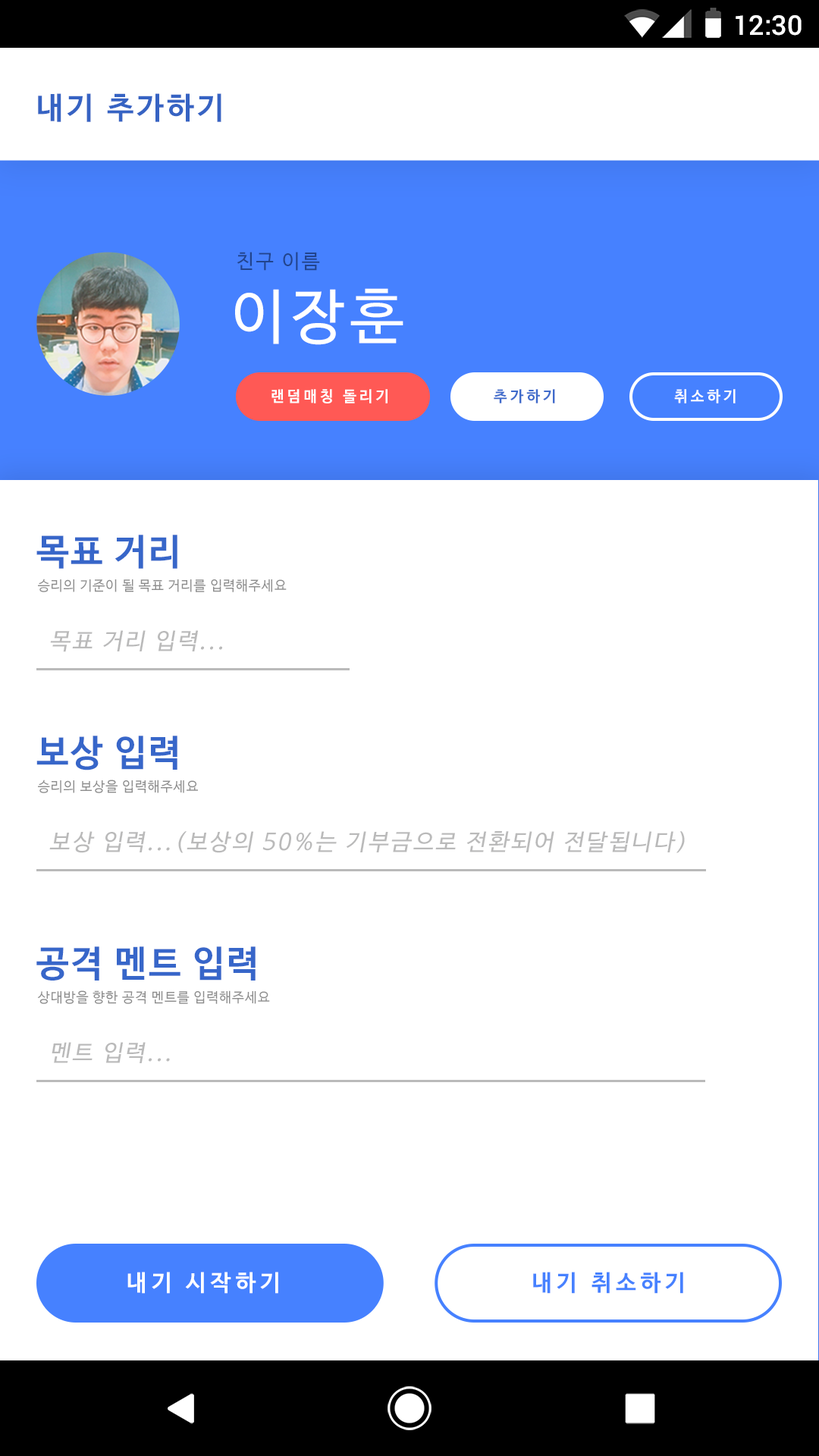
<style>
.page{position:relative;width:819px;height:1456px;background:#ffffff}
.page>*{position:absolute;margin:0}
.t1{font:27.3px "Roboto-Medium";color:#ffffff}
.t2{font:30.3px "NanumBarunGothicBold";letter-spacing:0.1em;color:#3663c3}
.t3{font:19.8px "NanumBarunGothic";letter-spacing:0.1em;color:#22448d}
.t4{font:59.5px "NanumBarunGothic";letter-spacing:0.1em;color:#ffffff}
.t5{font:15.2px "NanumBarunGothicBold";letter-spacing:0.2em;color:#fefefe}
.t6{font:15.2px "NanumBarunGothicBold";letter-spacing:0.2em;color:#3f6bcb}
.t7{font:15.2px "NanumBarunGothicBold";letter-spacing:0.2em;color:#ffffff}
.t8{font:36.4px "NanumBarunGothicBold";letter-spacing:0.05em;color:#3766c9}
.t9{font:13.7px "NanumBarunGothic";letter-spacing:0.05em;color:#8d8d8d}
.t10{font:22.9px "NanumBarunGothic";letter-spacing:0.1em;color:#bababa;font-style:italic}
.t11{font:22.7px "NanumBarunGothicBold";letter-spacing:0.2em;color:#ffffff}
.t12{font:22.7px "NanumBarunGothicBold";letter-spacing:0.2em;color:#4681ff}
</style>
<div class="page">
<p class="t1" style="left:736px;top:15px;width:66px;height:21px">12:30</p>
<p class="t2" style="left:38px;top:93px;width:183px;height:29px">내기 추가하기</p>
<p class="t3" style="left:237px;top:252px;width:83px;height:19px">친구 이름</p>
<p class="t4" style="left:235px;top:288px;width:168px;height:57px">이장훈</p>
<p class="t5" style="left:271px;top:389px;width:117px;height:14px">랜덤매칭 돌리기</p>
<p class="t6" style="left:494px;top:389px;width:61px;height:14px">추가하기</p>
<p class="t7" style="left:674px;top:389px;width:62px;height:14px">취소하기</p>
<p class="t8" style="left:36px;top:535px;width:141px;height:34px">목표 거리</p>
<p class="t9" style="left:38px;top:579px;width:249px;height:13px">승리의 기준이 될 목표 거리를 입력해주세요</p>
<p class="t10" style="left:50px;top:630px;width:172px;height:22px">목표 거리 입력...</p>
<p class="t8" style="left:36px;top:736px;width:141px;height:34px">보상 입력</p>
<p class="t9" style="left:38px;top:780px;width:160px;height:13px">승리의 보상을 입력해주세요</p>
<p class="t10" style="left:49px;top:831px;width:636px;height:22px">보상 입력...(보상의 50%는 기부금으로 전환되어 전달됩니다)</p>
<p class="t8" style="left:36px;top:946px;width:220px;height:35px">공격 멘트 입력</p>
<p class="t9" style="left:37px;top:990px;width:233px;height:14px">상대방을 향한 공격 멘트를 입력해주세요</p>
<p class="t10" style="left:52px;top:1042px;width:118px;height:21px">멘트 입력...</p>
<p class="t11" style="left:127px;top:1272px;width:151px;height:22px">내기 시작하기</p>
<p class="t12" style="left:533px;top:1272px;width:150px;height:22px">내기 취소하기</p>
</div>
